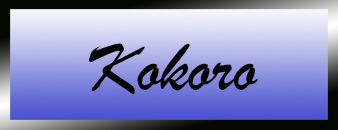
<style>
.page{position:relative;width:338px;height:130px}
.page>*{position:absolute;margin:0}
.t1{font:75px "BrushScriptMT";color:#000000}
</style>
<div class="page">
<p class="t1" style="left:89px;top:43px;width:169px;height:52px">Kokoro</p>
</div>
